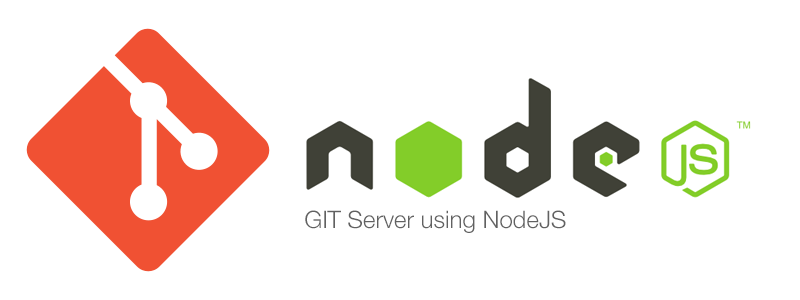
<style>
.page{position:relative;width:800px;height:300px;background:#ffffff}
.page>*{position:absolute;margin:0}
.t1{font:24px "HelveticaNeue-Light";color:#616161}
</style>
<div class="page">
<p class="t1" style="left:305px;top:210px;width:261px;height:23px">GIT Server using NodeJS</p>
</div>
